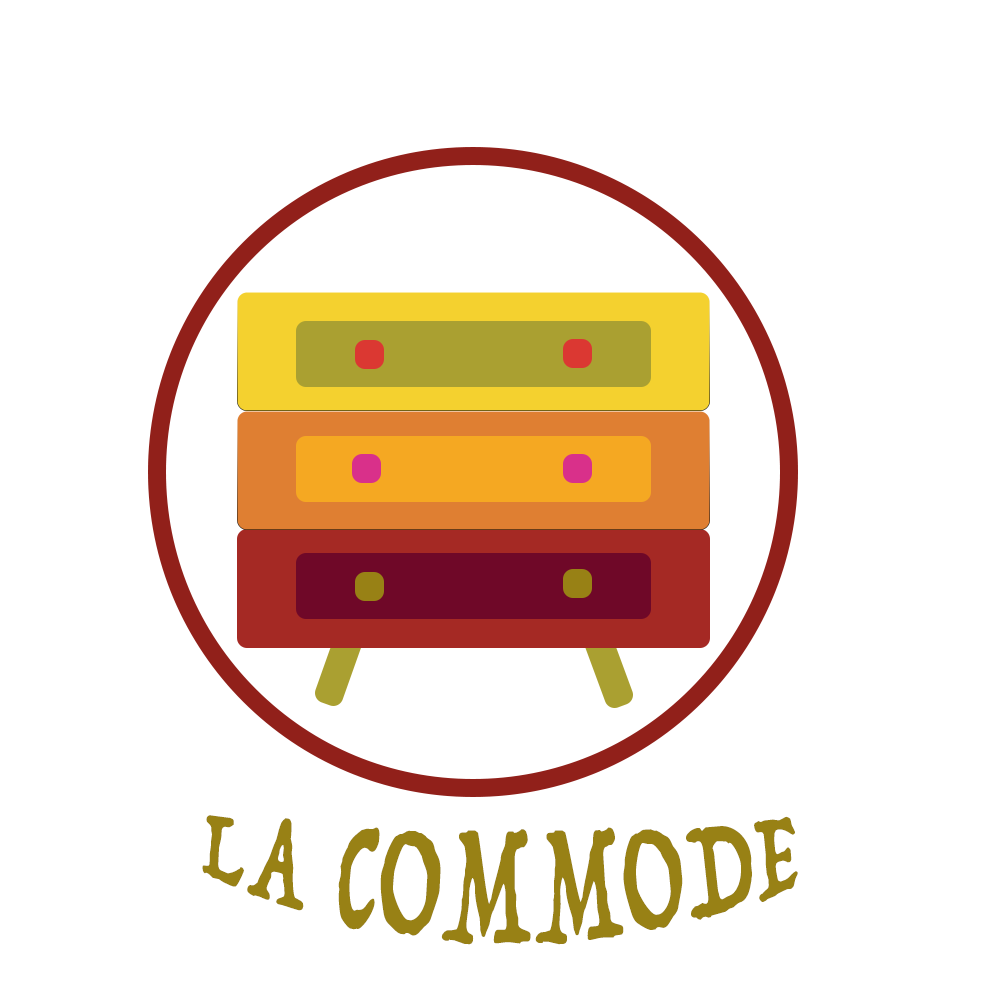
<style>
.page{position:relative;width:1000px;height:1000px;background:#ffffff}
.page>*{position:absolute;margin:0}
.t1{font:100px "Trattatello";letter-spacing:0.02em;color:#988115;text-transform:uppercase}
</style>
<div class="page">
<p class="t1" style="left:202px;top:815px;width:596px;height:130px">LA COMMODE</p>
</div>
